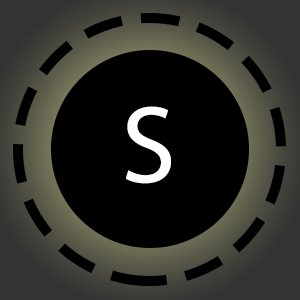
<style>
.page{position:relative;width:300px;height:300px;background:#000000}
.page>*{position:absolute;margin:0}
.t1{font:110px "MyriadPro-Regular";color:#ffffff}
</style>
<div class="page">
<p class="t1" style="left:126px;top:106px;width:45px;height:78px">S</p>
</div>
